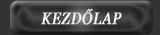
<style>
.page{position:relative;width:160px;height:35px}
.page>*{position:absolute;margin:0}
.t1{font:16.8px "Georgia-Italic";letter-spacing:0.025em;color:#ffffff;font-weight:bold;scale:0.83 1}
</style>
<div class="page">
<p class="t1" style="left:41px;top:8px;width:81px;height:17px">KEZDŐLAP</p>
</div>
